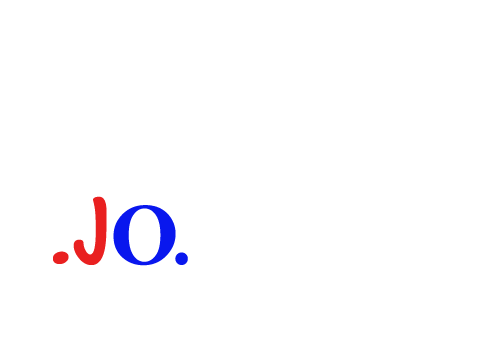
<style>
.page{position:relative;width:504px;height:360px;background:#ffffff}
.page>*{position:absolute;margin:0}
.t1{font:100px "ARCENA";color:#e92020}
.t2{font:90px "BellMTBold";color:#0917ee}
</style>
<div class="page">
<p class="t1" style="left:53px;top:196px;width:135px;height:70px">.J<span class="t2">O.</span></p>
</div>
